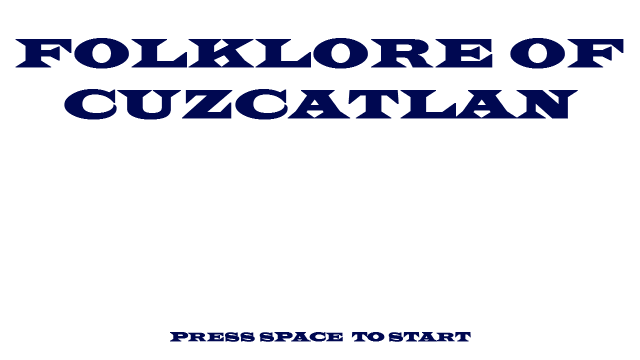
<style>
.page{position:relative;width:640px;height:360px;background:#ffffff}
.page>*{position:absolute;margin:0}
.t1{font:42.5px "LatinWide";color:#000851;text-transform:uppercase;font-weight:bold}
.t2{font:12.5px "LatinWide";color:#000851;text-transform:uppercase;font-weight:bold}
</style>
<div class="page">
<p class="t1" style="left:15px;top:38px;width:609px;height:82px;text-align:center">Folklore of<br>Cuzcatlan</p>
<p class="t2" style="left:170px;top:332px;width:301px;height:10px">Press Space  TO START</p>
</div>
